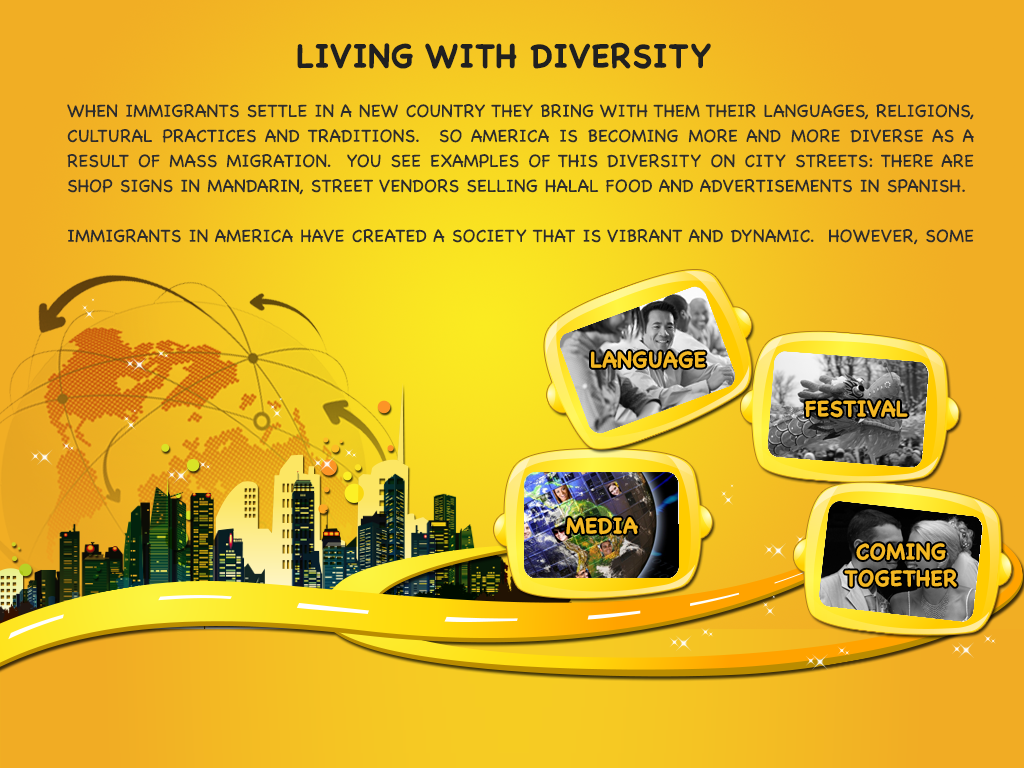
<style>
.page{position:relative;width:1024px;height:768px}
.page>*{position:absolute;margin:0}
.t1{font:33.3px "Chalkboard-Bold";letter-spacing:0.005em;color:#202020;text-transform:uppercase}
.t2{font:18.1px/25px "Chalkboard";letter-spacing:0.005em;color:#2d2d2d;text-transform:uppercase}
.t3{font:22.2px "Chalkboard-Bold";letter-spacing:0.005em;color:#f2b424;text-transform:uppercase}
.t4{font:22.2px "Chalkboard-Bold";letter-spacing:0.005em;color:#f3b723;text-transform:uppercase}
</style>
<div class="page">
<p class="t1" style="left:297px;top:42px;width:414px;height:27px">Living with Diversity</p>
<p class="t2" style="left:67px;top:104px;width:907px;height:141px;text-align:justify">When immigrants settle in a new country they bring with them their languages, religions, cultural practices and traditions.  So America is becoming more and more diverse as a result of mass migration.  You see examples of this diversity on city streets: there are shop signs in Mandarin, street vendors selling Halal food and advertisements in Spanish. <br><br>Immigrants in America have created a society that is vibrant and dynamic.  However, some people resist this diversity because they fear it is changing American culture or undermining social cohesion.  Some argue that immigrants should ‘assimilate’ into American society rather than keeping their own cultures.<br><br>Let's look at some examples of ethnic diversity in America.</p>
<p class="t3" style="left:591px;top:351px;width:115px;height:17px">language</p>
<p class="t4" style="left:805px;top:400px;width:103px;height:18px">fESTIVAL</p>
<p class="t4" style="left:566px;top:517px;width:72px;height:18px">mEDIA</p>
<p class="t4" style="left:844px;top:543px;width:113px;height:44px;text-align:center">COMING<br>TOGETHER</p>
</div>
